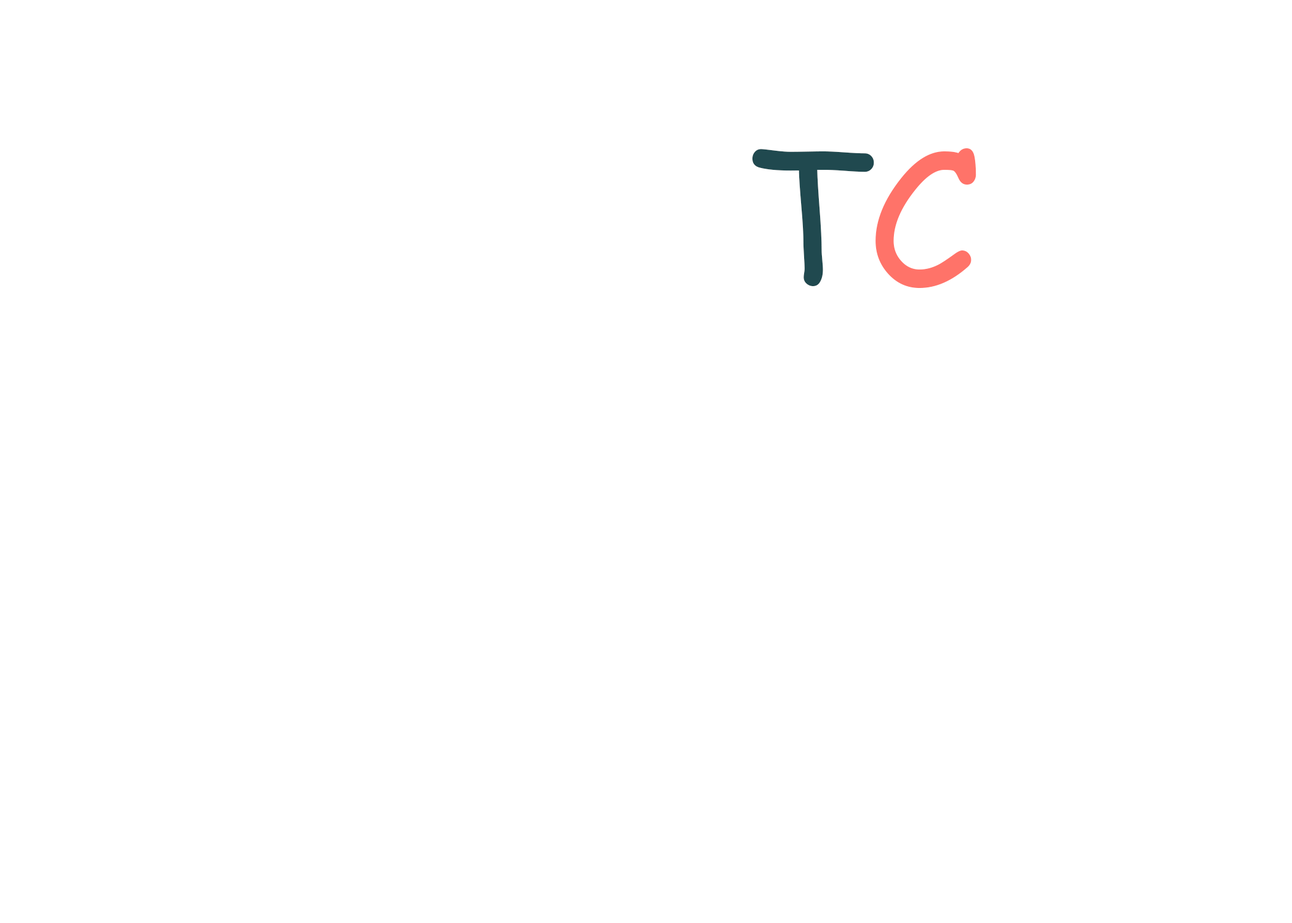
<style>
.page{position:relative;width:1292px;height:923px;background:#ffffff}
.page>*{position:absolute;margin:0}
.t1{font:184.6px "ComicSansMS";color:#20494f}
.t2{font:184.6px "ComicSansMS";color:#ff7369}
</style>
<div class="page">
<p class="t1" style="left:752px;top:148px;width:224px;height:140px">T<span class="t2">C</span></p>
</div>
